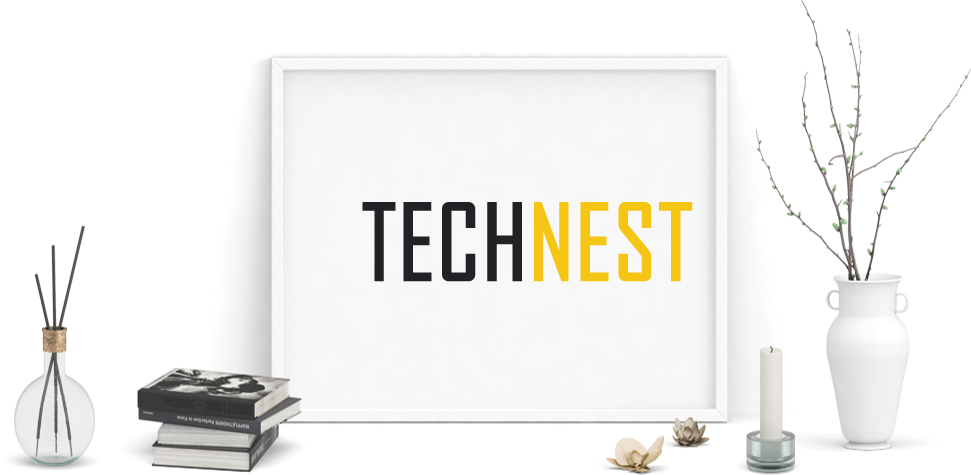
<style>
.page{position:relative;width:971px;height:475px;background:#ffffff}
.page>*{position:absolute;margin:0}
.t1{font:100px "AgencyFB-Reg";color:#212226;font-weight:bold}
.t2{font:100px "AgencyFB-Reg";color:#f4c613;font-weight:bold}
</style>
<div class="page">
<p class="t1" style="left:362px;top:202px;width:331px;height:80px">TECH<span class="t2">NEST</span></p>
</div>
